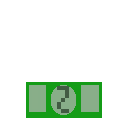
<style>
.page{position:relative;width:128px;height:128px;background:#ffffff}
.page>*{position:absolute;margin:0}
.t1{font:40px "MunroNarrow";color:#425b43}
</style>
<div class="page">
<p class="t1" style="left:57px;top:86px;width:12px;height:27px;rotate:180deg">2</p>
</div>
